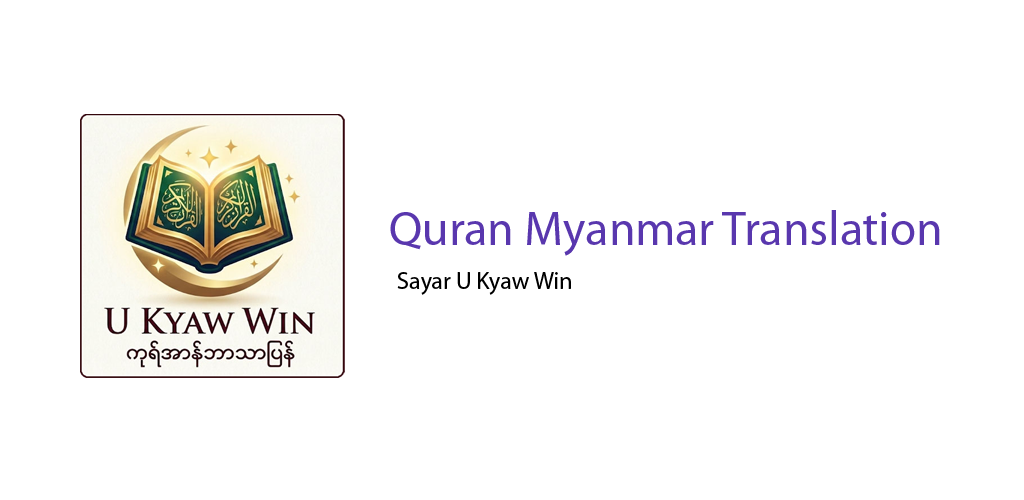
<style>
.page{position:relative;width:1024px;height:500px;background:#ffffff}
.page>*{position:absolute;margin:0}
.t1{font:48px "MyriadPro-Regular";color:#5937ae}
.t2{font:24px "MyriadPro-Regular";color:#000000}
</style>
<div class="page">
<p class="t1" style="left:390px;top:210px;width:550px;height:46px">Quran Myanmar Translation</p>
<p class="t2" style="left:397px;top:272px;width:174px;height:23px">Sayar U Kyaw Win</p>
</div>
